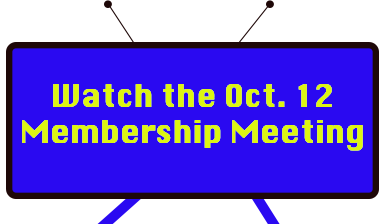
<style>
.page{position:relative;width:384px;height:224px;background:#2a09f1}
.page>*{position:absolute;margin:0}
.t1{font:30px "Silom";color:#ddf512}
</style>
<div class="page">
<p class="t1" style="left:22px;top:84px;width:341px;height:67px;text-align:center">Watch the Oct. 12 <br>Membership Meeting</p>
</div>
